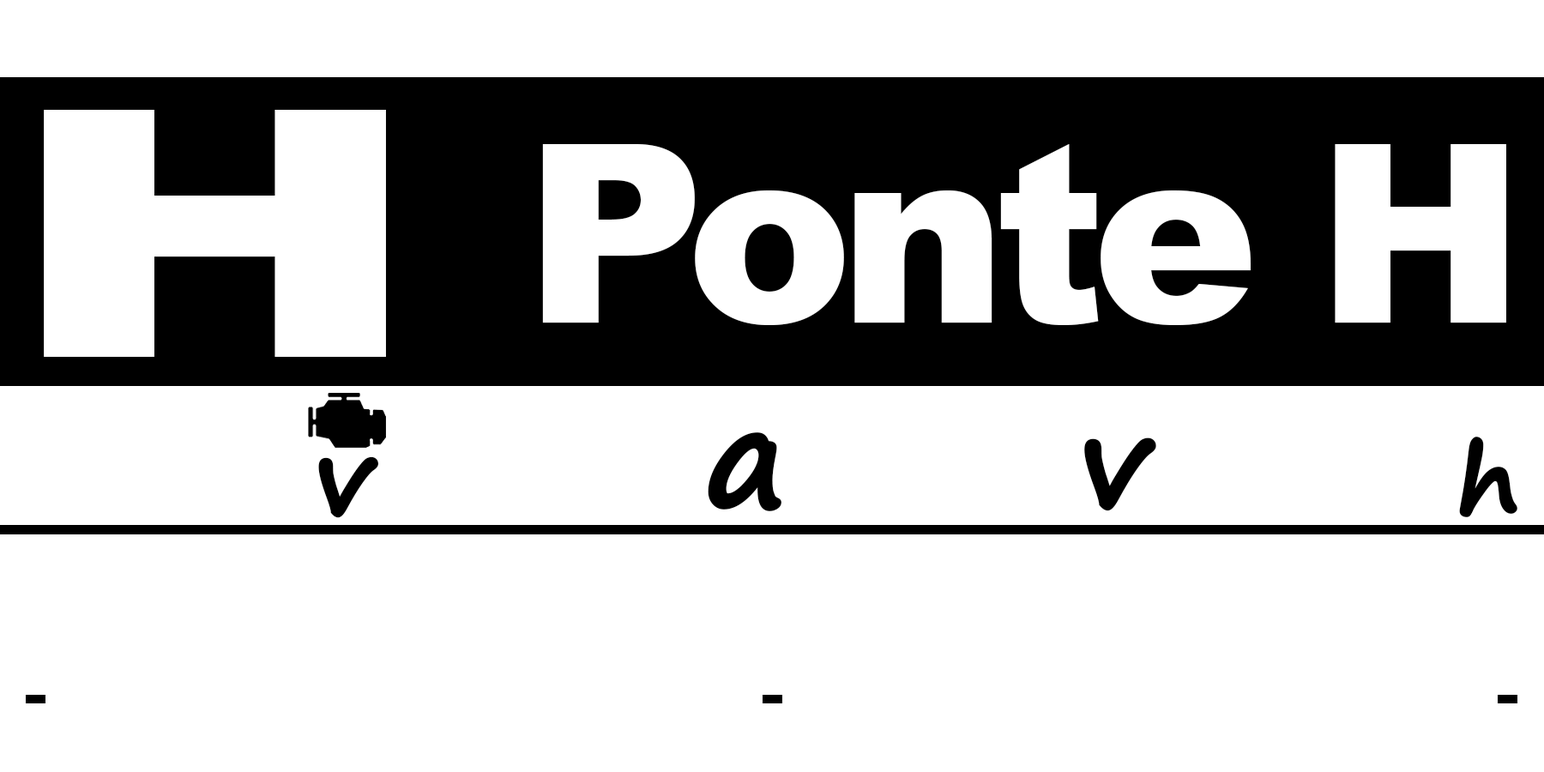
<style>
.page{position:relative;width:1544px;height:772px;background:#ffffff}
.page>*{position:absolute;margin:0}
.t1{font:345.7px "Arial-Black";letter-spacing:-0.05em;color:#ffffff;scale:1.44 1}
.t2{font:249.6px "Arial-Black";letter-spacing:-0.05em;color:#ffffff}
.t3{font:138.6px "SegoePrint-Bold";letter-spacing:-0.01em;color:#000000;font-weight:bold}
.t4{font:125.2px "SegoePrint-Bold";letter-spacing:-0.01em;color:#000000;font-weight:bold}
.t5{font:96.6px "SegoePrint-Bold";letter-spacing:-0.01em;color:#000000;font-weight:bold}
.t6{font:104.2px "SegoePrint-Bold";letter-spacing:-0.01em;color:#000000;font-weight:bold}
</style>
<div class="page">
<p class="t1" style="left:44px;top:110px;width:342px;height:247px">H</p>
<p class="t2" style="left:542px;top:144px;width:965px;height:181px">Ponte H</p>
<p class="t3" style="left:708px;top:432px;width:74px;height:79px">a</p>
<p class="t4" style="left:1084px;top:438px;width:73px;height:73px">v</p>
<p class="t5" style="left:1459px;top:437px;width:59px;height:80px">h</p>
<p class="t6" style="left:318px;top:456px;width:60px;height:62px">v</p>
</div>
